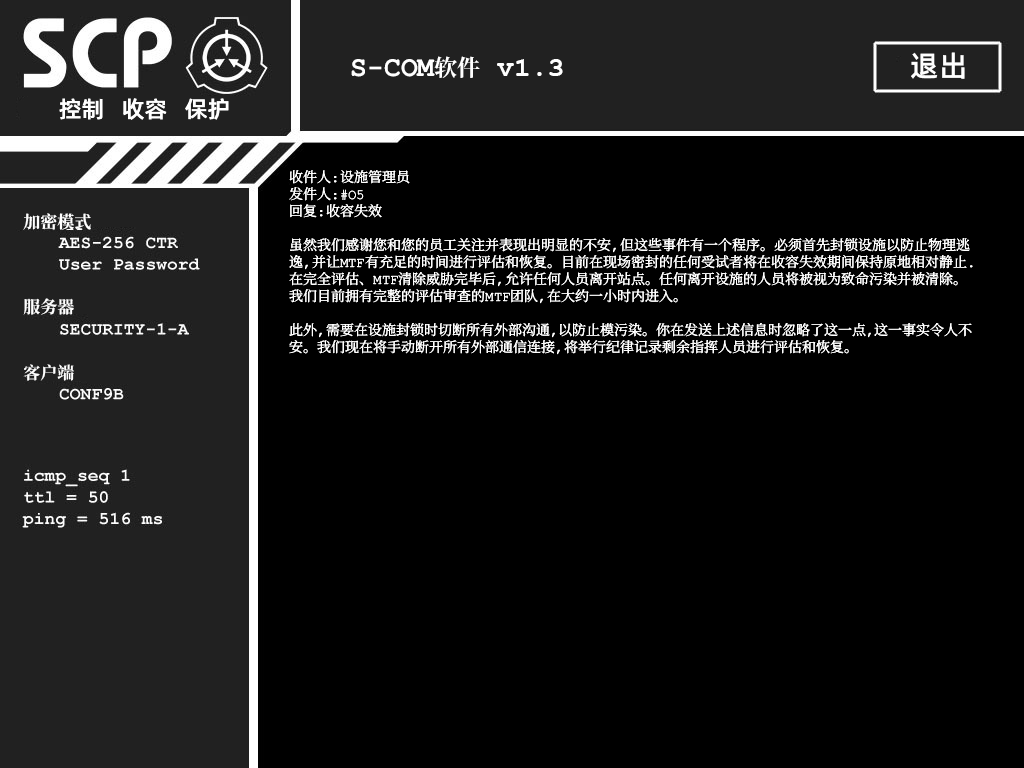
<style>
.page{position:relative;width:1024px;height:768px;background:#000000}
.page>*{position:absolute;margin:0}
.t1{font:29px "AlibabaPuHuiTiM";color:#ffffff}
.t2{font:28px "ContainmentBreach-Bold";color:#ffffff}
.t3{font:23px "ContainmentBreach-Bold";color:#ffffff}
.t4{font:28px "CourierNewPS-BoldMT";color:#ffffff}
.t5{font:23px "AlibabaPuHuiTiM";color:#ffffff}
.t6{font:14px/17px "ContainmentBreach-Regular";color:#ffffff}
.t7{font:17px/22px "ContainmentBreach-Bold";color:#ffffff}
.t8{font:17px/17px "ContainmentBreach-Bold";color:#ffffff}
</style>
<div class="page">
<p class="t1" style="left:911px;top:52px;width:54px;height:27px">退出</p>
<p class="t2" style="left:351px;top:56px;width:212px;height:22px">S-COM<span class="t3">软件 </span><span class="t4">v1.3</span></p>
<p class="t5" style="left:59px;top:98px;width:170px;height:22px">控制   收容   保护</p>
<p class="t6" style="left:289px;top:170px;width:684px;height:185px">收件人：设施管理员<br>发件人：#O5<br>回复：收容失效<br><br>虽然我们感谢您和您的员工关注并表现出明显的不安，但这些事件有一个程序。必须首先封锁设施以防止物理逃<br>逸，并让MTF有充足的时间进行评估和恢复。目前在现场密封的任何受试者将在收容失效期间保持原地相对静止.<br>在完全评估、MTF清除威胁完毕后，允许任何人员离开站点。任何离开设施的人员将被视为致命污染并被清除。<br>我们目前拥有完整的评估审查的MTF团队，在大约一小时内进入。<br><br>此外，需要在设施封锁时切断所有外部沟通，以防止模污染。你在发送上述信息时忽略了这一点，这一事实令人不<br>安。我们现在将手动断开所有外部通信连接，将举行纪律记录剩余指挥人员进行评估和恢复。</p>
<p class="t7" style="left:23px;top:213px;width:68px;height:168px"><span class="t8">加密模式<br><br><br><br><br></span>服务器<br> <br><br>客户端</p>
</div>
